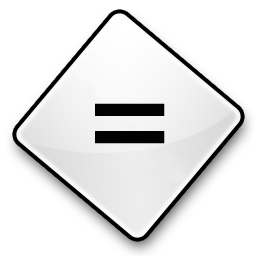
<style>
.page{position:relative;width:256px;height:256px;background:#ffffff}
.page>*{position:absolute;margin:0}
.t1{font:132px "MyriadPro-Bold";letter-spacing:0.005em;color:#020202}
</style>
<div class="page">
<p class="t1" style="left:95px;top:103px;width:70px;height:41px">=</p>
</div>
